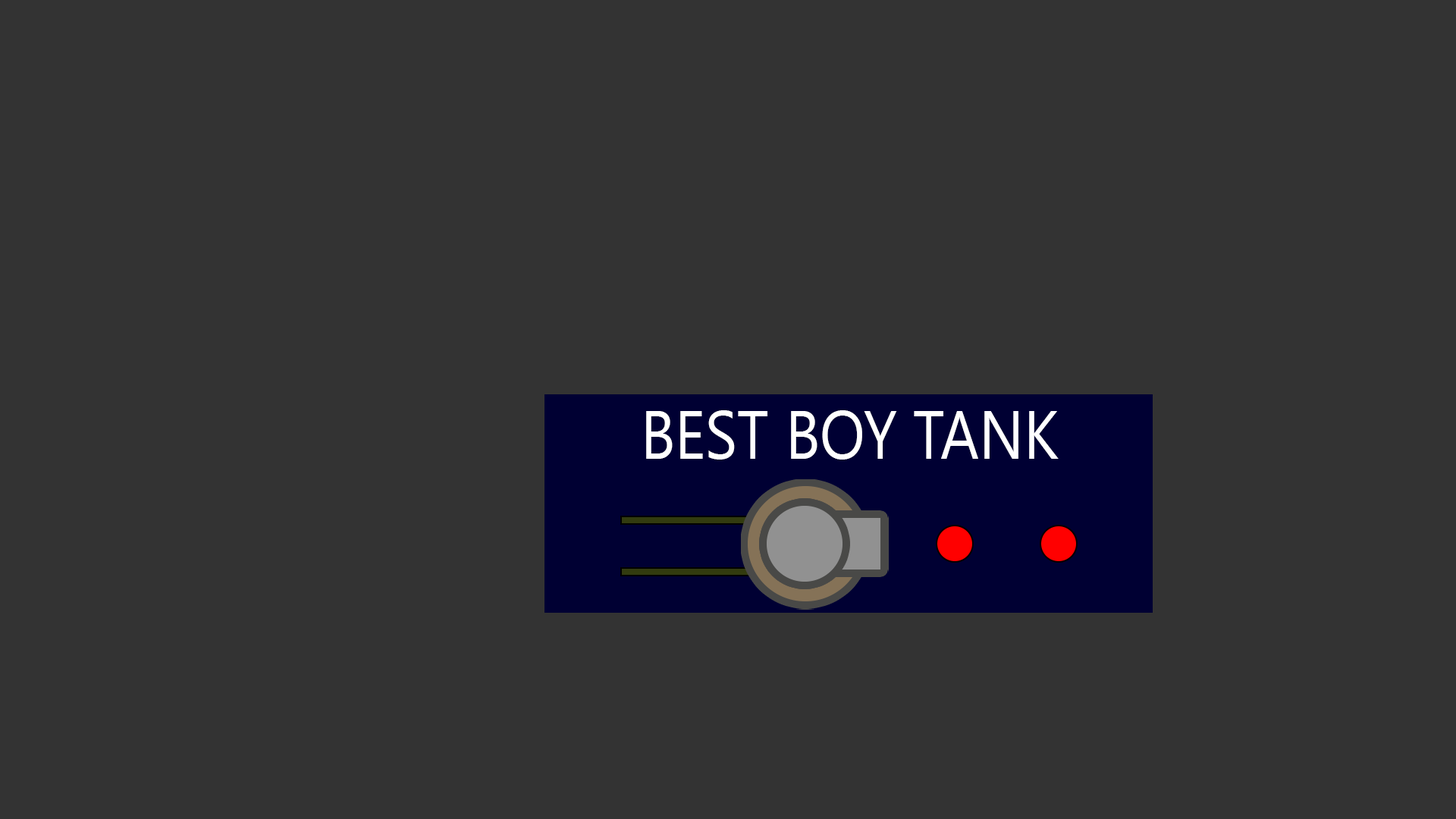
<style>
.page{position:relative;width:1456px;height:819px;background:#333333}
.page>*{position:absolute;margin:0}
.t1{font:67.9px "SegoeUI";color:#ffffff;scale:0.88 1}
</style>
<div class="page">
<p class="t1" style="left:646px;top:410px;width:413px;height:50px">BEST BOY TANK</p>
</div>
